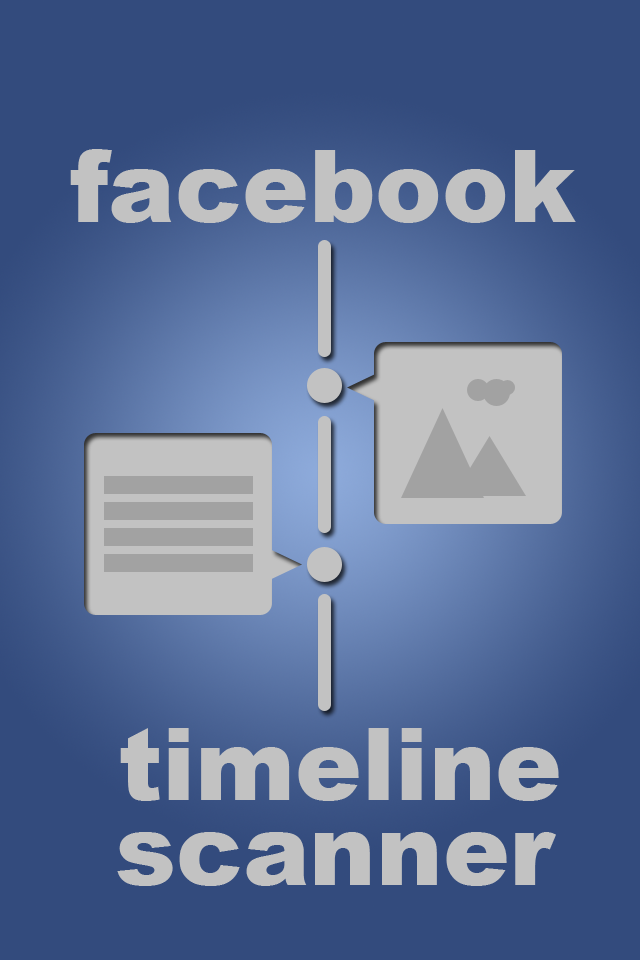
<style>
.page{position:relative;width:640px;height:960px;background:#334b7d}
.page>*{position:absolute;margin:0}
.t1{font:100px "Arial-Black";color:#c2c2c2}
</style>
<div class="page">
<p class="t1" style="left:70px;top:149px;width:506px;height:74px">facebook</p>
<p class="t1" style="left:120px;top:728px;width:439px;height:73px">timeline</p>
<p class="t1" style="left:117px;top:832px;width:439px;height:54px">scanner</p>
</div>
